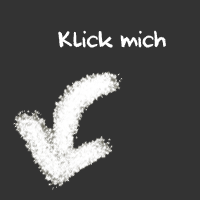
<style>
.page{position:relative;width:200px;height:200px;background:#333333}
.page>*{position:absolute;margin:0}
.t1{font:20px "DKCoolCrayon";color:#ffffff}
</style>
<div class="page">
<p class="t1" style="left:58px;top:30px;width:108px;height:18px">Klick mich</p>
</div>
